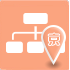
<style>
.page{position:relative;width:70px;height:70px;background:#fba47f}
.page>*{position:absolute;margin:0}
.t1{font:12px "JLinXin";letter-spacing:0.1em;color:#fba47f}
</style>
<div class="page">
<p class="t1" style="left:48px;top:33px;width:12px;height:12px">京</p>
</div>
